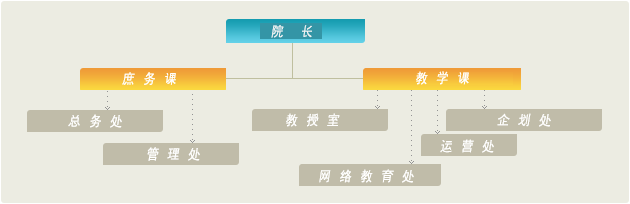
<style>
.page{position:relative;width:630px;height:204px;background:#ecece2}
.page>*{position:absolute;margin:0}
.t1{font:14px "New-Gulim";color:#f2f2f2;font-weight:bold;font-style:italic;scale:0.85 1}
.t2{font:14px "New-Gulim";color:#ffffff;font-weight:bold;font-style:italic;scale:0.85 1}
</style>
<div class="page">
<p class="t1" style="left:271px;top:25px;width:41px;height:13px">院    长</p>
<p class="t2" style="left:122px;top:72px;width:54px;height:13px">庶  务  课</p>
<p class="t2" style="left:416px;top:71px;width:53px;height:14px">教  学  课</p>
<p class="t2" style="left:286px;top:113px;width:54px;height:14px">教  授  室</p>
<p class="t2" style="left:497px;top:113px;width:54px;height:14px">企  划  处</p>
<p class="t2" style="left:68px;top:114px;width:54px;height:14px">总  务  处</p>
<p class="t2" style="left:147px;top:147px;width:53px;height:14px">管  理  处</p>
<p class="t2" style="left:440px;top:139px;width:54px;height:14px">运  营  处</p>
<p class="t2" style="left:319px;top:169px;width:95px;height:14px">网  络  教  育  处</p>
</div>
